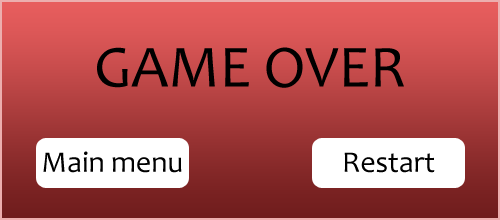
<style>
.page{position:relative;width:500px;height:220px}
.page>*{position:absolute;margin:0}
.t1{font:60px "Candara";color:#000000}
.t2{font:30px "Candara";color:#000000}
</style>
<div class="page">
<p class="t1" style="left:97px;top:47px;width:307px;height:41px">GAME OVER</p>
<p class="t2" style="left:43px;top:151px;width:139px;height:22px">Main menu</p>
<p class="t2" style="left:344px;top:152px;width:91px;height:21px">Restart</p>
</div>
